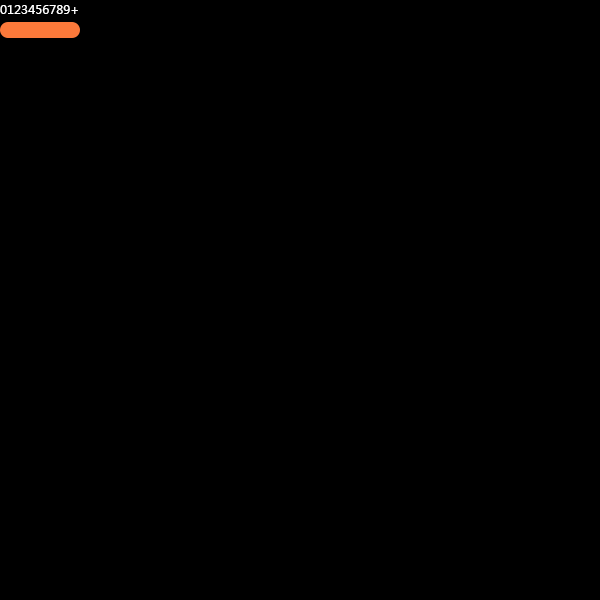
<style>
.page{position:relative;width:600px;height:600px;background:#000000}
.page>*{position:absolute;margin:0}
.t1{font:12px "MicrosoftYaHei";color:#ffffff}
</style>
<div class="page">
<p class="t1" style="left:0px;top:5px;width:78px;height:9px">0123456789+</p>
</div>
